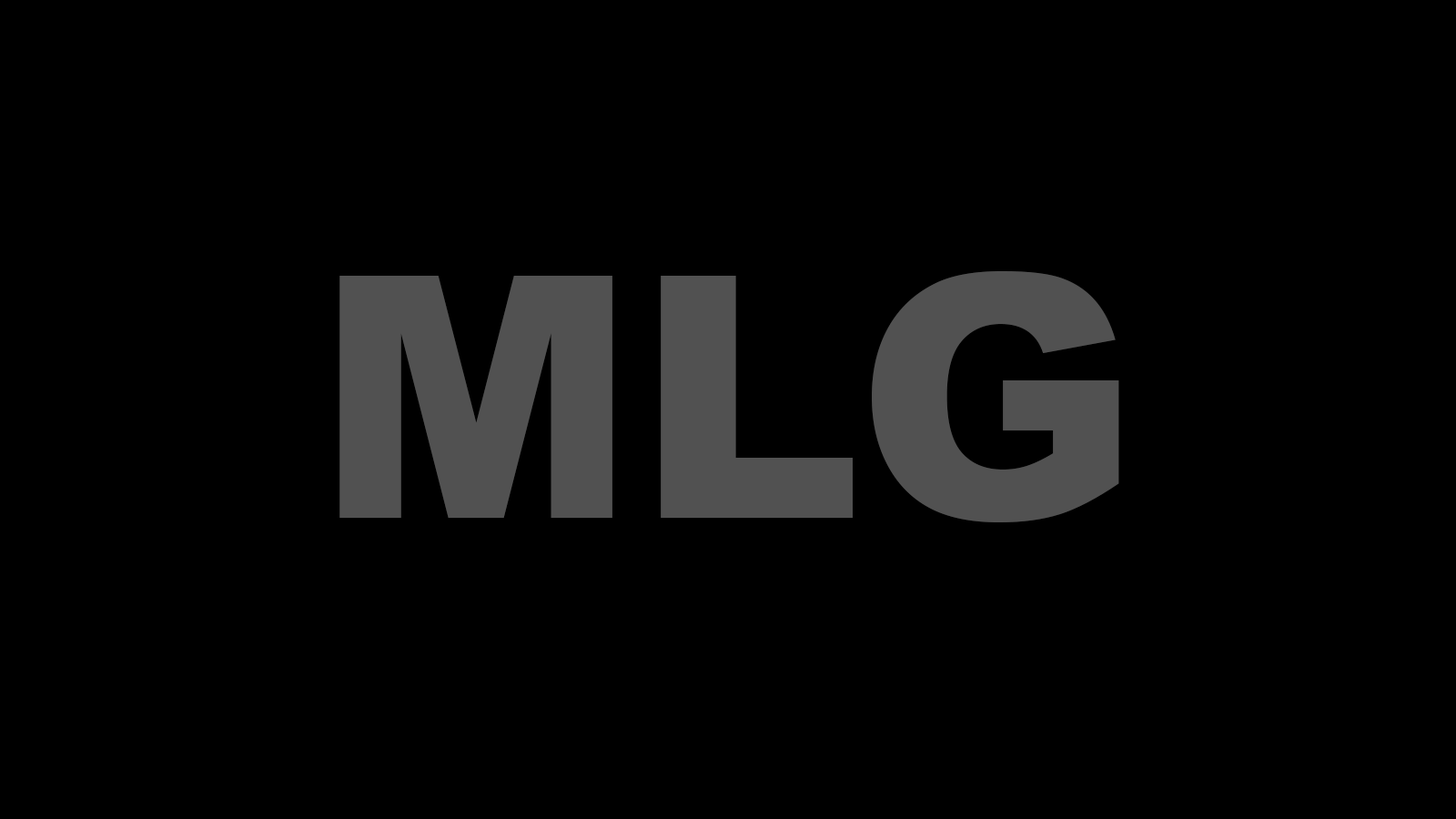
<style>
.page{position:relative;width:1456px;height:819px;background:#000000}
.page>*{position:absolute;margin:0}
.t1{font:338.9px "Arial-Black";color:#515151}
</style>
<div class="page">
<p class="t1" style="left:339px;top:271px;width:780px;height:251px">MLG</p>
</div>
